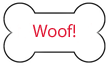
<style>
.page{position:relative;width:110px;height:67px;background:#ffffff}
.page>*{position:absolute;margin:0}
.t1{font:18px "MyriadPro-Regular";color:#e01935}
</style>
<div class="page">
<p class="t1" style="left:32px;top:24px;width:44px;height:14px">Woof!</p>
</div>
